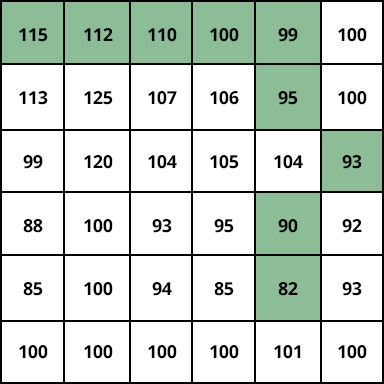
<style>
.page{position:relative;width:384px;height:384px;background:#ffffff}
.page>*{position:absolute;margin:0}
.t1{font:18px "OpenSans-Bold";letter-spacing:-0.025em;color:#000000}
</style>
<div class="page">
<p class="t1" style="left:19px;top:28px;width:29px;height:14px">115</p>
<p class="t1" style="left:84px;top:28px;width:29px;height:13px">112</p>
<p class="t1" style="left:148px;top:28px;width:29px;height:14px">110</p>
<p class="t1" style="left:210px;top:28px;width:29px;height:14px">100</p>
<p class="t1" style="left:278px;top:28px;width:20px;height:14px">99</p>
<p class="t1" style="left:338px;top:28px;width:29px;height:14px">100</p>
<p class="t1" style="left:19px;top:91px;width:29px;height:14px">113</p>
<p class="t1" style="left:84px;top:91px;width:29px;height:14px">125</p>
<p class="t1" style="left:148px;top:91px;width:29px;height:14px">107</p>
<p class="t1" style="left:210px;top:91px;width:29px;height:14px">106</p>
<p class="t1" style="left:278px;top:91px;width:20px;height:14px">95</p>
<p class="t1" style="left:338px;top:91px;width:29px;height:14px">100</p>
<p class="t1" style="left:23px;top:155px;width:20px;height:14px">99</p>
<p class="t1" style="left:84px;top:155px;width:29px;height:14px">120</p>
<p class="t1" style="left:148px;top:155px;width:29px;height:14px">104</p>
<p class="t1" style="left:210px;top:155px;width:29px;height:14px">105</p>
<p class="t1" style="left:274px;top:155px;width:29px;height:14px">104</p>
<p class="t1" style="left:342px;top:155px;width:20px;height:14px">93</p>
<p class="t1" style="left:23px;top:219px;width:20px;height:14px">88</p>
<p class="t1" style="left:84px;top:219px;width:29px;height:14px">100</p>
<p class="t1" style="left:152px;top:219px;width:20px;height:14px">93</p>
<p class="t1" style="left:214px;top:219px;width:20px;height:14px">95</p>
<p class="t1" style="left:278px;top:219px;width:20px;height:14px">90</p>
<p class="t1" style="left:342px;top:219px;width:20px;height:14px">92</p>
<p class="t1" style="left:23px;top:282px;width:20px;height:14px">85</p>
<p class="t1" style="left:84px;top:282px;width:29px;height:14px">100</p>
<p class="t1" style="left:152px;top:282px;width:20px;height:14px">94</p>
<p class="t1" style="left:214px;top:282px;width:20px;height:14px">85</p>
<p class="t1" style="left:278px;top:282px;width:20px;height:14px">82</p>
<p class="t1" style="left:342px;top:282px;width:20px;height:14px">93</p>
<p class="t1" style="left:19px;top:345px;width:29px;height:14px">100</p>
<p class="t1" style="left:84px;top:345px;width:29px;height:14px">100</p>
<p class="t1" style="left:148px;top:345px;width:29px;height:14px">100</p>
<p class="t1" style="left:210px;top:345px;width:29px;height:14px">100</p>
<p class="t1" style="left:274px;top:345px;width:27px;height:14px">101</p>
<p class="t1" style="left:338px;top:345px;width:29px;height:14px">100</p>
</div>
